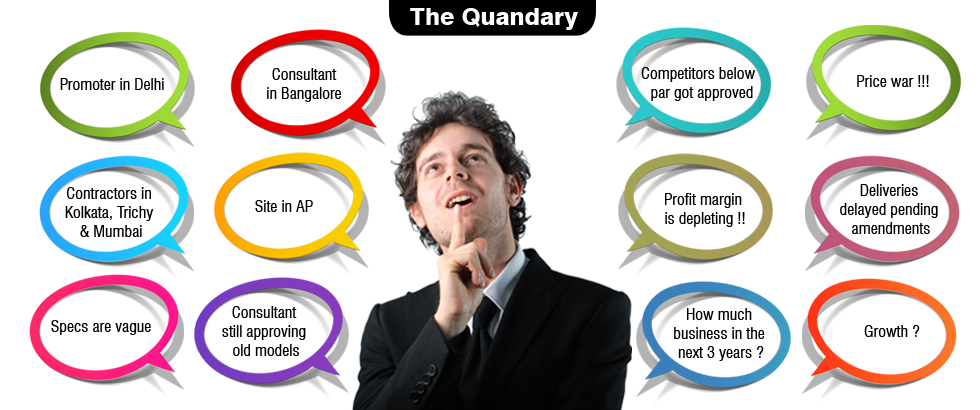
<style>
.page{position:relative;width:980px;height:410px;background:#ffffff}
.page>*{position:absolute;margin:0}
.t1{font:24px "Swiss721BT-Heavy";color:#ffffff}
.t2{font:16px "Swiss721BT-RomanCondensed";color:#000000}
</style>
<div class="page">
<p class="t1" style="left:410px;top:8px;width:169px;height:22px">The Quandary</p>
<p class="t2" style="left:60px;top:78px;width:104px;height:12px">Promoter in Delhi</p>
<p class="t2" style="left:267px;top:68px;width:74px;height:34px;text-align:center">Consultant<br>in Bangalore</p>
<p class="t2" style="left:641px;top:67px;width:115px;height:34px;text-align:center">Competitors below  <br>par got approved</p>
<p class="t2" style="left:857px;top:75px;width:72px;height:12px">Price war !!!</p>
<p class="t2" style="left:840px;top:184px;width:98px;height:50px;text-align:center">Deliveries <br>delayed pending <br>amendments</p>
<p class="t2" style="left:65px;top:187px;width:89px;height:50px;text-align:center">Contractors in <br>Kolkata, Trichy <br>&amp; Mumbai</p>
<p class="t2" style="left:665px;top:193px;width:80px;height:34px;text-align:center">Profit margin <br>is depleting !!</p>
<p class="t2" style="left:255px;top:200px;width:58px;height:12px">Site in AP</p>
<p class="t2" style="left:222px;top:306px;width:84px;height:50px;text-align:center">Consultant <br>still approving <br>old models</p>
<p class="t2" style="left:674px;top:308px;width:91px;height:53px;text-align:center">How much <br>business in the <br>next 3 years ?</p>
<p class="t2" style="left:51px;top:320px;width:100px;height:15px">Specs are vague</p>
<p class="t2" style="left:864px;top:325px;width:56px;height:12px">Growth ?</p>
</div>
